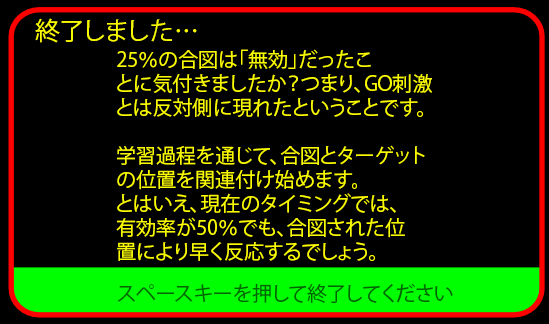
<style>
.page{position:relative;width:549px;height:324px;background:#000000}
.page>*{position:absolute;margin:0}
.t1{font:25px "KozGoPr6N-Regular";color:#f9f900}
.t2{font:20px "KozGoPr6N-Regular";color:#f9f900}
.t3{font:20px "KozGoPr6N-Regular";color:#006400}
</style>
<div class="page">
<p class="t1" style="left:35px;top:18px;width:162px;height:25px">終了しました…</p>
<p class="t2" style="left:116px;top:49px;width:316px;height:212px">25％の合図は「無効」だったこ<br>とに気付きましたか？つまり、GO刺激<br>とは反対側に現れたということです。<br><br>学習過程を通じて、合図とターゲット<br>の位置を関連付け始めます。<br>とはいえ、現在のタイミングでは、<br>有効率が50％でも、合図された位<br>置により早く反応するでしょう。</p>
<p class="t3" style="left:117px;top:283px;width:336px;height:20px">スペースキーを押して終了してください</p>
</div>
